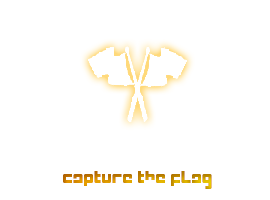
<style>
.page{position:relative;width:270px;height:200px;background:#ffffff}
.page>*{position:absolute;margin:0}
.t1{font:24px "Intercorp"}
</style>
<div class="page">
<p class="t1" style="left:63px;top:171px;width:149px;height:18px">Capture the Flag</p>
</div>
